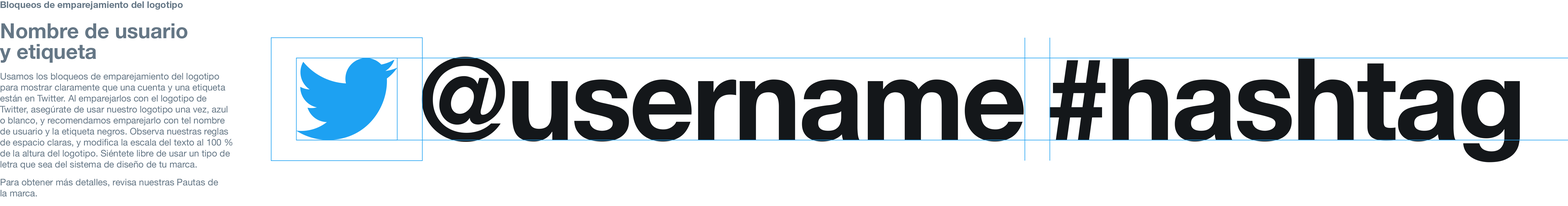
<style>
.page{position:relative;width:1568px;height:206px;background:#ffffff}
.page>*{position:absolute;margin:0}
.t1{font:9.2px "HelveticaNeue";color:#657786}
.t2{font:9.2px/20.7px "HelveticaNeue-Bold";color:#657786}
.t3{font:20.7px/20.7px "HelveticaNeue-Bold";color:#657786}
.t4{font:114.1px "HelveticaNeue-Bold";letter-spacing:-0.025em;color:#14171a}
</style>
<div class="page">
<p class="t1" style="left:0px;top:1px;width:232px;height:196px"><span class="t2">Bloqueos de emparejamiento del logotipo<br><br></span><span class="t3">Nombre de usuario <br>y etiqueta<br><br></span>Usamos los bloqueos de emparejamiento del logotipo para mostrar claramente que una cuenta y una etiqueta están en Twitter. Al emparejarlos con el logotipo de Twitter, asegúrate de usar nuestro logotipo una vez, azul o blanco, y recomendamos emparejarlo con tel nombre de usuario y la etiqueta negros. Observa nuestras reglas de espacio claras, y modifica la escala del texto al 100 % de la altura del logotipo. Siéntete libre de usar un tipo de letra que sea del sistema de diseño de tu marca.<br><br>Para obtener más detalles, revisa nuestras Pautas de <br>la marca.</p>
<p class="t4" style="left:422px;top:57px;width:602px;height:85px">@username</p>
<p class="t4" style="left:1049px;top:59px;width:471px;height:104px">#hashtag</p>
</div>
